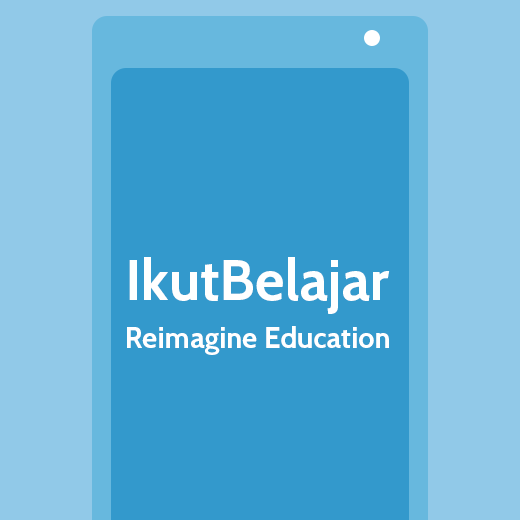
<style>
.page{position:relative;width:520px;height:520px;background:#3399cc}
.page>*{position:absolute;margin:0}
.t1{font:57.2px "Cabin-Bold";color:#ffffff}
.t2{font:29.3px "Cabin-Bold";color:#ffffff}
</style>
<div class="page">
<p class="t1" style="left:129px;top:257px;width:261px;height:57px">IkutBelajar</p>
<p class="t2" style="left:127px;top:326px;width:262px;height:29px">Reimagine Education</p>
</div>
